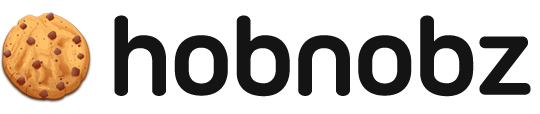
<style>
.page{position:relative;width:540px;height:114px;background:#ffffff}
.page>*{position:absolute;margin:0}
.t1{font:116.1px "UbuntuTitling-Bold";letter-spacing:-0.05em;color:#141414}
</style>
<div class="page">
<p class="t1" style="left:114px;top:15px;width:417px;height:82px">hobnobz</p>
</div>
